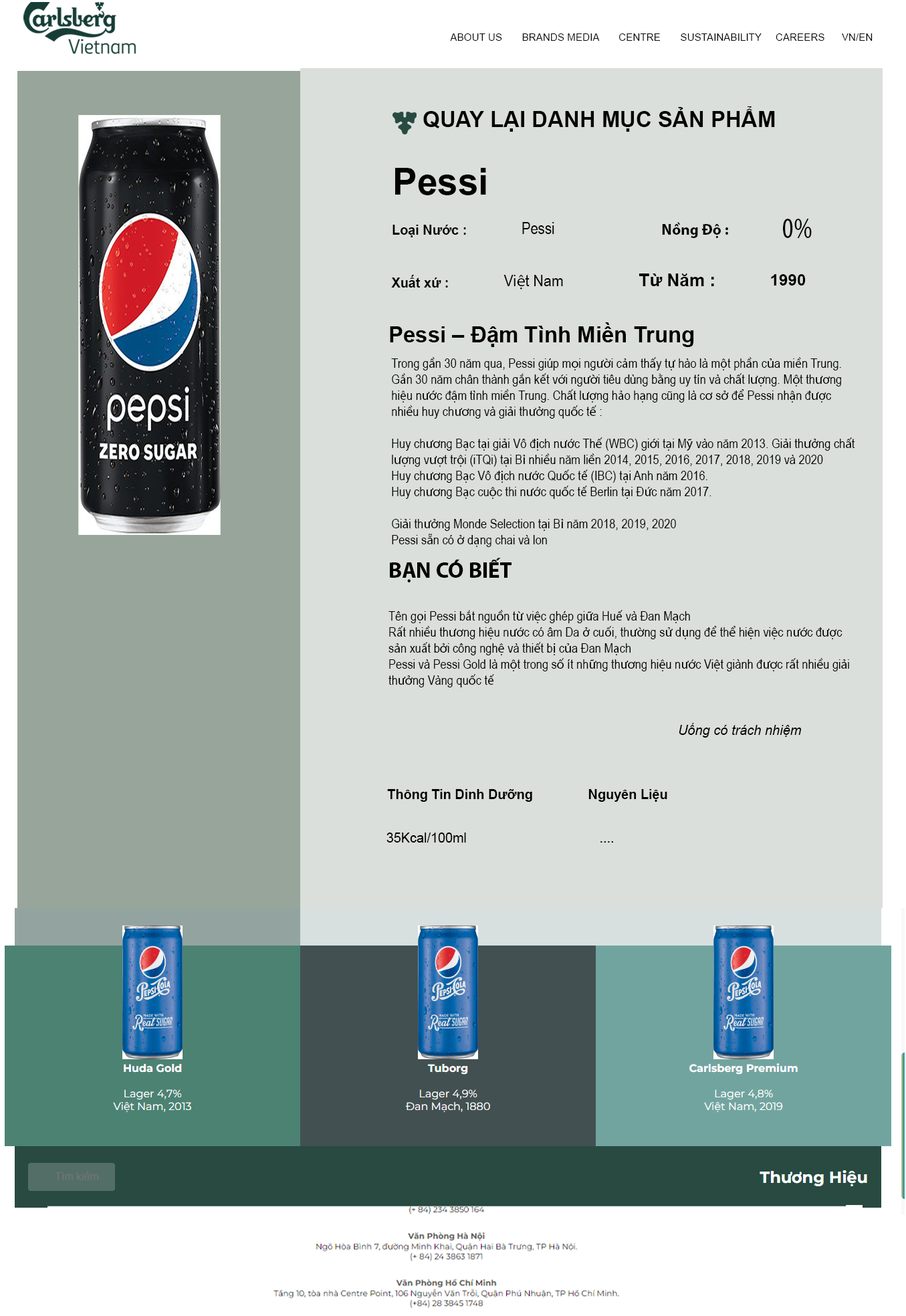
<style>
.page{position:relative;width:906px;height:1316px;background:#dadfdb}
.page>*{position:absolute;margin:0}
.t1{font:10.2px "ArialMT";color:#090a0a}
.t2{font:22.1px "Arial-BoldMT";color:#030303}
.t3{font:36.8px "Arial-BoldMT";color:#030303}
.t4{font:29px "MyriadPro-Cond";color:#030303}
.t5{font:13.3px "Arial-BoldMT";color:#030303}
.t6{font:16.4px "ArialNarrow";color:#030303}
.t7{font:15.3px "MyriadPro-Bold";color:#030303}
.t8{font:16.3px "ArialNarrow";color:#030303;scale:1.08 1}
.t9{font:16.3px "MyriadPro-Regular";color:#030303;scale:1.08 1}
.t10{font:17.4px "Arial-BoldMT";color:#000000}
.t11{font:16.2px "Arial-BoldMT";color:#000000}
.t12{font:22.1px "Arial-BoldMT";color:#000000}
.t13{font:13.4px "ArialNarrow";color:#000000}
.t14{font:13.4px "MyriadPro-Regular";color:#000000}
.t15{font:22.1px "MyriadPro-Bold";color:#000000}
.t16{font:13.4px "Arial-ItalicMT";color:#000000}
.t17{font:13.3px "Arial-BoldMT";color:#000000}
.t18{font:13.3px "ArialMT";color:#000000}
</style>
<div class="page">
<p class="t1" style="left:450px;top:33px;width:423px;height:8px">ABOUT US       BRANDS MEDIA       CENTRE       SUSTAINABILITY     CAREERS      VN/EN</p>
<p class="t2" style="left:423px;top:106px;width:352px;height:26px">QUAY LẠI DANH MỤC SẢN PHẨM</p>
<p class="t3" style="left:395px;top:168px;width:91px;height:27px">Pessi</p>
<p class="t4" style="left:783px;top:219px;width:29px;height:19px">0%</p>
<p class="t5" style="left:393px;top:225px;width:73px;height:12px">Loại Nước :</p>
<p class="t6" style="left:522px;top:222px;width:32px;height:12px">Pessi</p>
<p class="t7" style="left:662px;top:222px;width:66px;height:16px">Nồng Độ :</p>
<p class="t5" style="left:391px;top:275px;width:57px;height:13px">Xuất xứ :</p>
<p class="t8" style="left:504px;top:275px;width:59px;height:15px">Vi<span class="t9">ệ</span>t Nam</p>
<p class="t10" style="left:639px;top:274px;width:75px;height:12px">Từ Năm :</p>
<p class="t11" style="left:771px;top:274px;width:35px;height:12px">1990</p>
<p class="t12" style="left:390px;top:322px;width:304px;height:25px">Pessi – Đậm Tình Miền Trung</p>
<p class="t13" style="left:391px;top:357px;width:464px;height:190px">Trong g<span class="t14">ầ</span>n 30 năm qua, Pessi giúp m<span class="t14">ọ</span>i ng<span class="t14">ườ</span>i c<span class="t14">ả</span>m th<span class="t14">ấ</span>y t<span class="t14">ự</span> hào là m<span class="t14">ộ</span>t ph<span class="t14">ầ</span>n c<span class="t14">ủ</span>a mi<span class="t14">ề</span>n Trung.<br>G<span class="t14">ầ</span>n 30 năm chân thành g<span class="t14">ắ</span>n k<span class="t14">ế</span>t v<span class="t14">ớ</span>i ng<span class="t14">ườ</span>i tiêu dùng b<span class="t14">ằ</span>ng uy tín và ch<span class="t14">ấ</span>t l<span class="t14">ượ</span>ng. M<span class="t14">ộ</span>t th<span class="t14">ươ</span>ng <br>hi<span class="t14">ệ</span>u n<span class="t14">ướ</span>c đ<span class="t14">ậ</span>m tình mi<span class="t14">ề</span>n Trung. Ch<span class="t14">ấ</span>t l<span class="t14">ượ</span>ng h<span class="t14">ả</span>o h<span class="t14">ạ</span>ng cũng là c<span class="t14">ơ</span> s<span class="t14">ở</span> đ<span class="t14">ể</span> Pessi nh<span class="t14">ậ</span>n đ<span class="t14">ượ</span>c<br>nhi<span class="t14">ề</span>u huy ch<span class="t14">ươ</span>ng và gi<span class="t14">ả</span>i th<span class="t14">ưở</span>ng qu<span class="t14">ố</span>c t<span class="t14">ế</span> :<br><br>Huy ch<span class="t14">ươ</span>ng B<span class="t14">ạ</span>c t<span class="t14">ạ</span>i gi<span class="t14">ả</span>i Vô đ<span class="t14">ị</span>ch n<span class="t14">ướ</span>c Th<span class="t14">ế</span> (WBC) gi<span class="t14">ớ</span>i t<span class="t14">ạ</span>i M<span class="t14">ỹ</span> vào năm 2013. Gi<span class="t14">ả</span>i th<span class="t14">ưở</span>ng ch<span class="t14">ấ</span>t<br>l<span class="t14">ượ</span>ng v<span class="t14">ượ</span>t tr<span class="t14">ộ</span>i (iTQi) t<span class="t14">ạ</span>i B<span class="t14">ỉ</span> nhi<span class="t14">ề</span>u năm li<span class="t14">ề</span>n 2014, 2015, 2016, 2017, 2018, 2019 và 2020<br>Huy ch<span class="t14">ươ</span>ng B<span class="t14">ạ</span>c Vô đ<span class="t14">ị</span>ch n<span class="t14">ướ</span>c Qu<span class="t14">ố</span>c t<span class="t14">ế</span> (IBC) t<span class="t14">ạ</span>i Anh năm 2016.<br>Huy ch<span class="t14">ươ</span>ng B<span class="t14">ạ</span>c cu<span class="t14">ộ</span>c thi n<span class="t14">ướ</span>c qu<span class="t14">ố</span>c t<span class="t14">ế</span> Berlin t<span class="t14">ạ</span>i Đ<span class="t14">ứ</span>c năm 2017.<br><br>Gi<span class="t14">ả</span>i th<span class="t14">ưở</span>ng Monde Selection t<span class="t14">ạ</span>i B<span class="t14">ỉ</span> năm 2018, 2019, 2020<br>Pessi s<span class="t14">ẵ</span>n có <span class="t14">ở</span> d<span class="t14">ạ</span>ng chai và lon</p>
<p class="t15" style="left:390px;top:558px;width:122px;height:24px">BẠN CÓ BIẾT</p>
<p class="t13" style="left:389px;top:610px;width:460px;height:77px">Tên g<span class="t14">ọ</span>i Pessi b<span class="t14">ắ</span>t ngu<span class="t14">ồ</span>n t<span class="t14">ừ</span> vi<span class="t14">ệ</span>c ghép gi<span class="t14">ữ</span>a Hu<span class="t14">ế</span> và Đan M<span class="t14">ạ</span>ch<br>R<span class="t14">ấ</span>t nhi<span class="t14">ề</span>u th<span class="t14">ươ</span>ng hi<span class="t14">ệ</span>u n<span class="t14">ướ</span>c có âm Da <span class="t14">ở</span> cu<span class="t14">ố</span>i, th<span class="t14">ườ</span>ng s<span class="t14">ử</span> d<span class="t14">ụ</span>ng đ<span class="t14">ể</span> th<span class="t14">ể</span> hi<span class="t14">ệ</span>n vi<span class="t14">ệ</span>c n<span class="t14">ướ</span>c đ<span class="t14">ượ</span>c<br>s<span class="t14">ả</span>n xu<span class="t14">ấ</span>t b<span class="t14">ở</span>i công ngh<span class="t14">ệ</span> và thi<span class="t14">ế</span>t b<span class="t14">ị</span> c<span class="t14">ủ</span>a Đan M<span class="t14">ạ</span>ch<br>Pessi và Pessi Gold là m<span class="t14">ộ</span>t trong s<span class="t14">ố</span> ít nh<span class="t14">ữ</span>ng th<span class="t14">ươ</span>ng hi<span class="t14">ệ</span>u n<span class="t14">ướ</span>c Vi<span class="t14">ệ</span>t giành đ<span class="t14">ượ</span>c r<span class="t14">ấ</span>t nhi<span class="t14">ề</span>u gi<span class="t14">ả</span>i<br>th<span class="t14">ưở</span>ng Vàng qu<span class="t14">ố</span>c t<span class="t14">ế</span></p>
<p class="t16" style="left:679px;top:723px;width:123px;height:15px">Uống có trách nhiệm</p>
<p class="t17" style="left:387px;top:789px;width:280px;height:13px">Thông Tin Dinh Dưỡng               Nguyên Liệu</p>
<p class="t18" style="left:387px;top:833px;width:226px;height:10px">35Kcal/100ml                                    ....</p>
</div>
